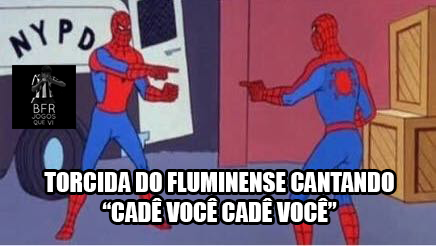
<style>
.page{position:relative;width:436px;height:246px}
.page>*{position:absolute;margin:0}
.t1{font:25px "Impact";color:#ffffff}
</style>
<div class="page">
<p class="t1" style="left:44px;top:172px;width:350px;height:50px;text-align:center">TORCIDA DO FLUMINENSE CANTANDO “CADÊ VOCÊ CADÊ VOCÊ”</p>
</div>
